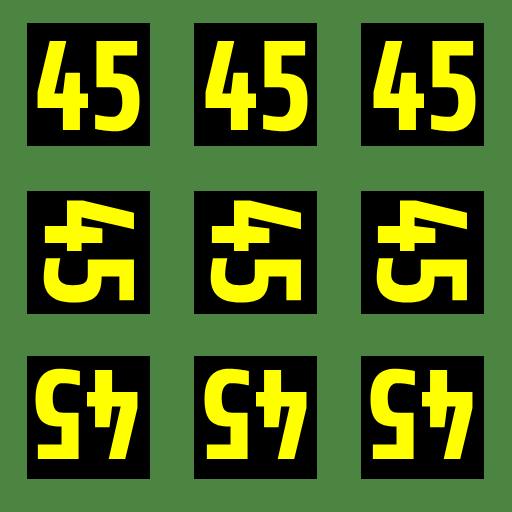
<style>
.page{position:relative;width:512px;height:512px;background:#4c8541}
.page>*{position:absolute;margin:0}
.t1{font:130px "Share-BoldOSF";color:#ffff00}
</style>
<div class="page">
<p class="t1" style="left:37px;top:41px;width:103px;height:91px">45</p>
<p class="t1" style="left:205px;top:41px;width:103px;height:91px">45</p>
<p class="t1" style="left:373px;top:41px;width:103px;height:91px">45</p>
<p class="t1" style="left:43px;top:200px;width:91px;height:103px;rotate:90deg">45</p>
<p class="t1" style="left:210px;top:200px;width:91px;height:103px;rotate:90deg">45</p>
<p class="t1" style="left:376px;top:200px;width:91px;height:103px;rotate:90deg">45</p>
<p class="t1" style="left:35px;top:368px;width:103px;height:91px;rotate:-180deg">45</p>
<p class="t1" style="left:204px;top:368px;width:103px;height:91px;rotate:-180deg">45</p>
<p class="t1" style="left:370px;top:368px;width:103px;height:91px;rotate:-180deg">45</p>
</div>
